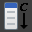
<style>
.page{position:relative;width:32px;height:32px;background:#3f3f3f}
.page>*{position:absolute;margin:0}
.t1{font:18px "BaskOldFace";color:#000000;font-style:italic;scale:1.23 1}
</style>
<div class="page">
<p class="t1" style="left:20px;top:3px;width:8px;height:8px">c</p>
</div>
